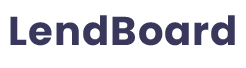
<style>
.page{position:relative;width:246px;height:68px;background:#ffffff}
.page>*{position:absolute;margin:0}
.t1{font:40.1px "Poppins-Bold";letter-spacing:0.025em;color:#39375c}
</style>
<div class="page">
<p class="t1" style="left:10px;top:15px;width:225px;height:31px">LendBoard</p>
</div>
